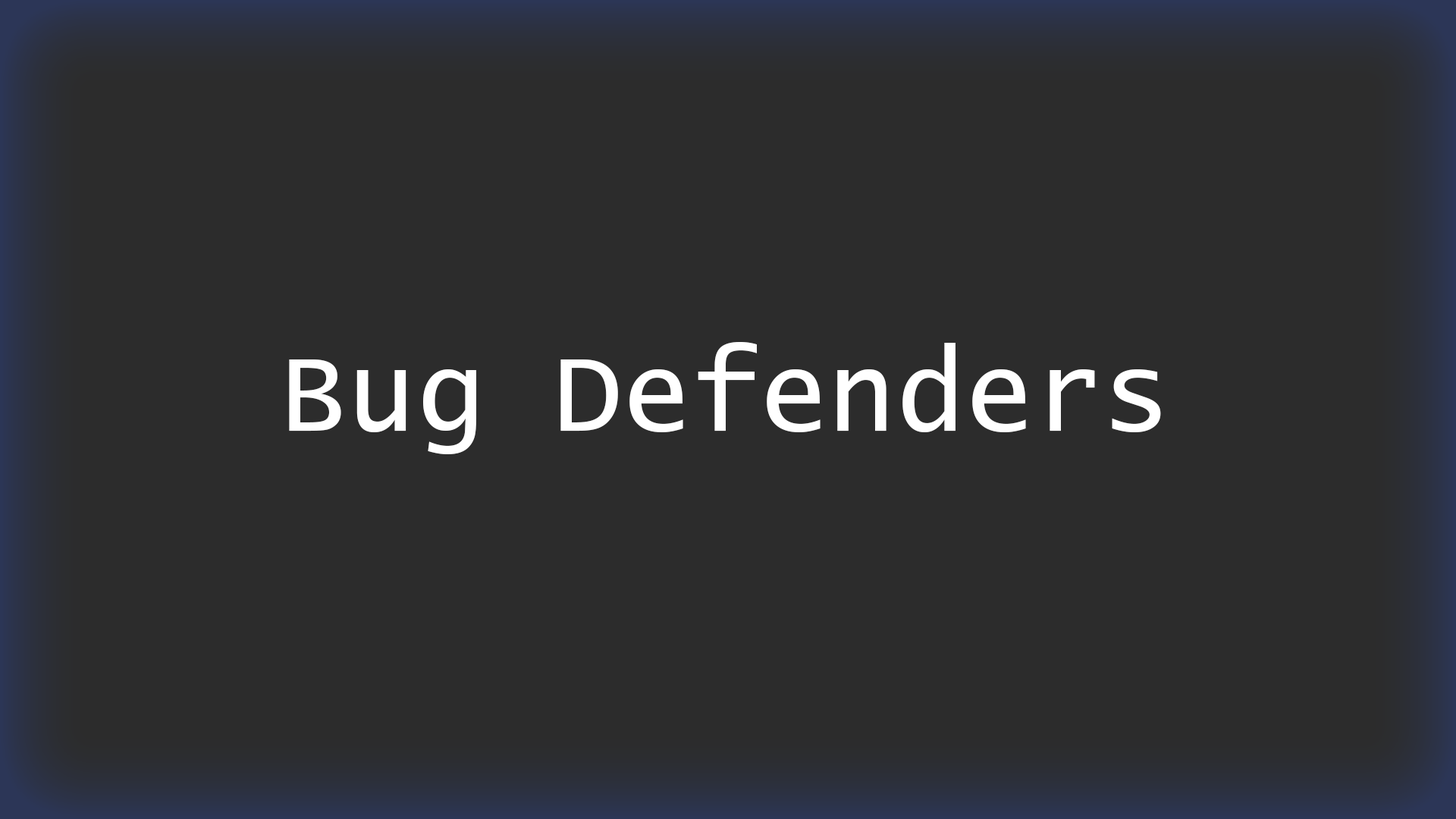
<style>
.page{position:relative;width:1456px;height:819px;background:#2c2c2c}
.page>*{position:absolute;margin:0}
.t1{font:113.7px "LucidaConsole";color:#ffffff}
</style>
<div class="page">
<p class="t1" style="left:289px;top:342px;width:872px;height:112px">Bug Defenders</p>
</div>
